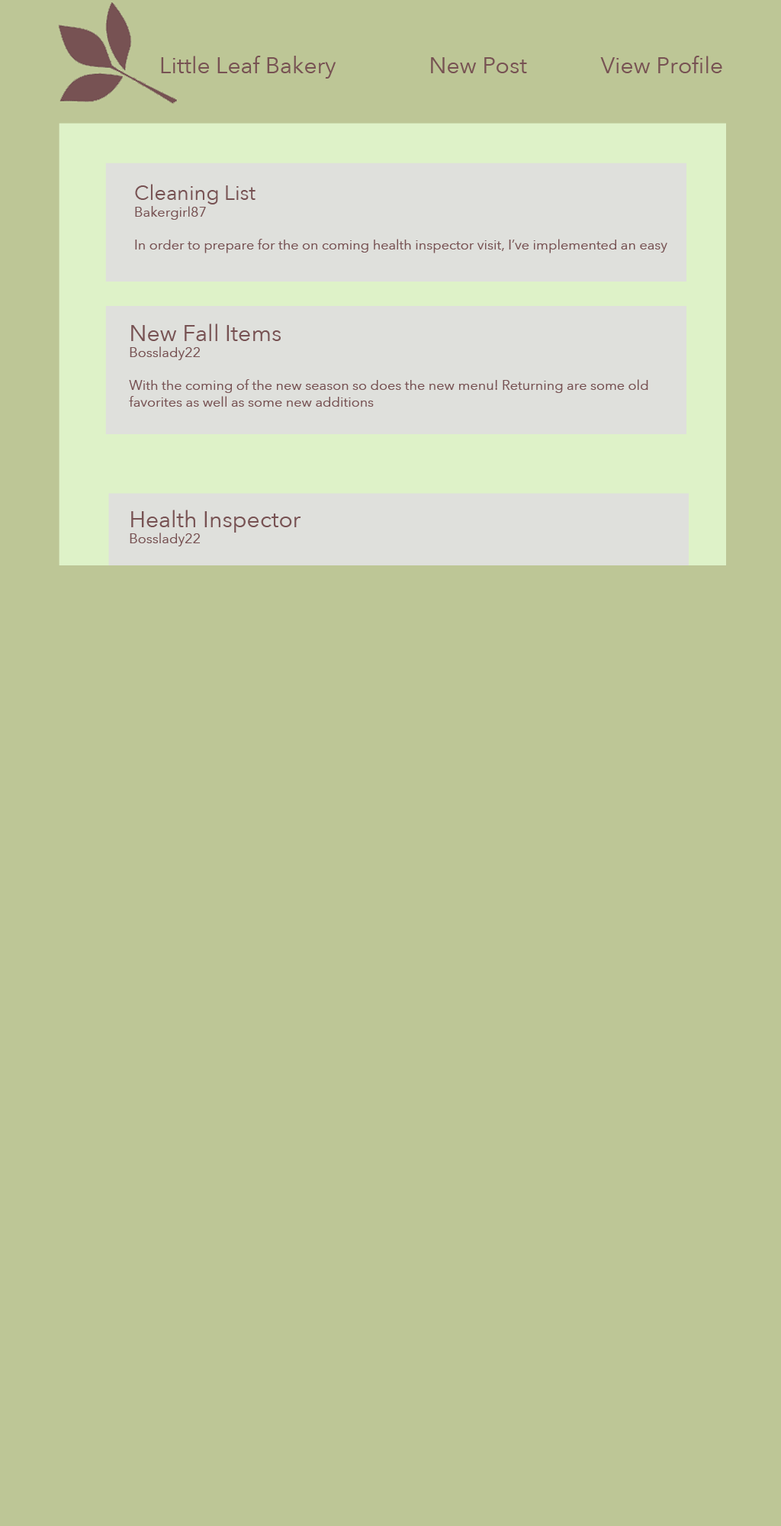
<style>
.page{position:relative;width:781px;height:1526px;background:#bdc696}
.page>*{position:absolute;margin:0}
.t1{font:22.9px "AvenirNext-Regular";color:#775253}
.t2{font:13.7px "AvenirNext-Regular";color:#775253}
.t3{font:20.6px "AvenirNext-Regular";color:#775253}
</style>
<div class="page">
<p class="t1" style="left:161px;top:56px;width:176px;height:23px">Little Leaf Bakery</p>
<p class="t1" style="left:431px;top:56px;width:292px;height:17px">New Post          View Profile</p>
<p class="t2" style="left:135px;top:184px;width:533px;height:69px"><span class="t3">Cleaning List <br></span>Bakergirl87<br><br>In order to prepare for the on coming health inspector visit, I’ve implemented an easy to foll</p>
<p class="t2" style="left:129px;top:324px;width:520px;height:83px"><span class="t1">New Fall Items<br></span>Bosslady22<br><br>With the coming of the new season so does the new menu! Returning are some old favorites as well as some new additions</p>
<p class="t1" style="left:130px;top:510px;width:171px;height:36px">Health Inspector<br><span class="t2">Bosslady22</span></p>
</div>
